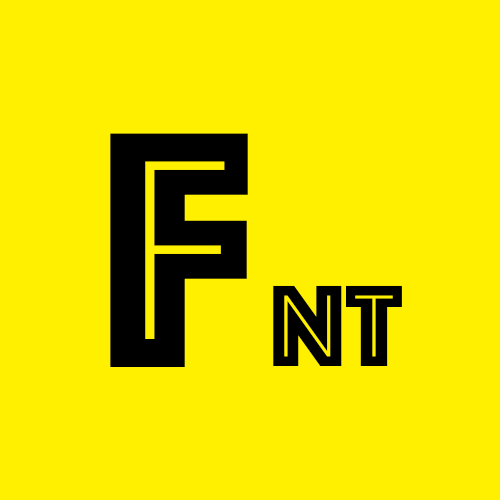
<style>
.page{position:relative;width:500px;height:500px;background:#fff000}
.page>*{position:absolute;margin:0}
.t1{font:350px "Phosphate-Inline";color:#000000}
.t2{font:120px "Phosphate-Inline";color:#000000}
</style>
<div class="page">
<p class="t1" style="left:110px;top:133px;width:138px;height:234px">F</p>
<p class="t2" style="left:273px;top:285px;width:129px;height:81px">nt</p>
</div>
